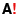
<style>
.page{position:relative;width:18px;height:18px;background:#ffffff}
.page>*{position:absolute;margin:0}
.t1{font:14.8px "HelveticaNeue-Bold";letter-spacing:0.025em;color:#000000}
.t2{font:14.8px "HelveticaNeue-Bold";letter-spacing:0.025em;color:#e81010}
</style>
<div class="page">
<p class="t1" style="left:2px;top:3px;width:14px;height:11px">A<span class="t2">!</span></p>
</div>
